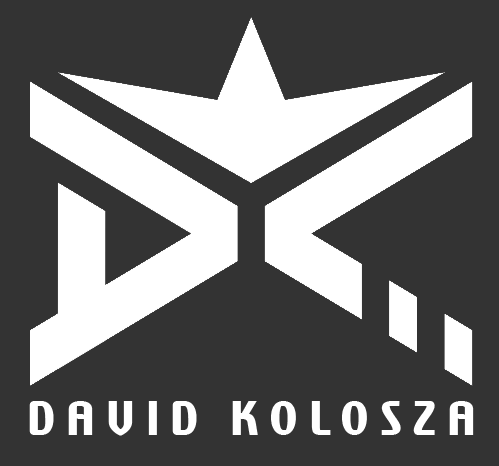
<style>
.page{position:relative;width:499px;height:466px;background:#333333}
.page>*{position:absolute;margin:0}
.t1{font:39.4px "Catapult-Bold";letter-spacing:0.26em;color:#ffffff;scale:1.08 1}
</style>
<div class="page">
<p class="t1" style="left:29px;top:401px;width:445px;height:35px">DAVID KOLOSZA</p>
</div>
